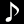
<style>
.page{position:relative;width:24px;height:24px;background:#000000}
.page>*{position:absolute;margin:0}
.t1{font:24px "MS-Gothic";letter-spacing:0.01em;color:#fffffc}
</style>
<div class="page">
<p class="t1" style="left:5px;top:1px;width:14px;height:21px">♪</p>
</div>
